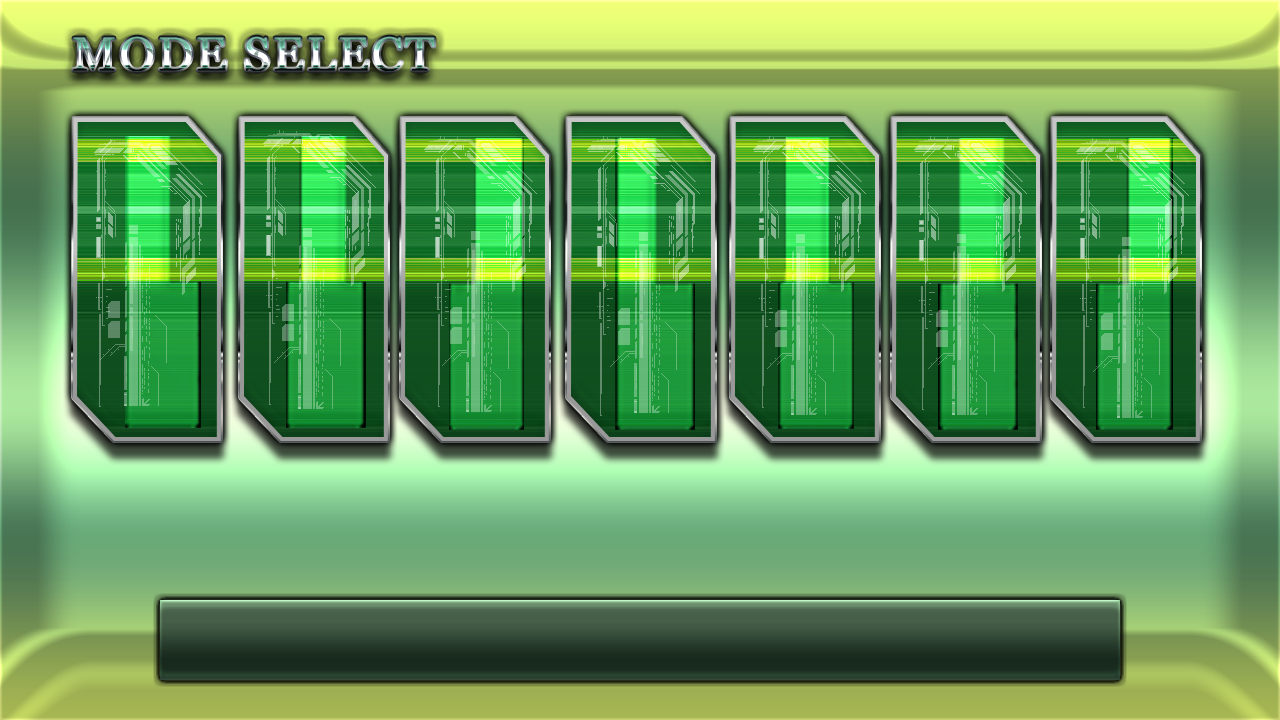
<style>
.page{position:relative;width:1280px;height:720px}
.page>*{position:absolute;margin:0}
.t1{font:48px "Vani";letter-spacing:0.05em}
</style>
<div class="page">
<p class="t1" style="left:73px;top:36px;width:362px;height:36px">MODE SELECT</p>
</div>
